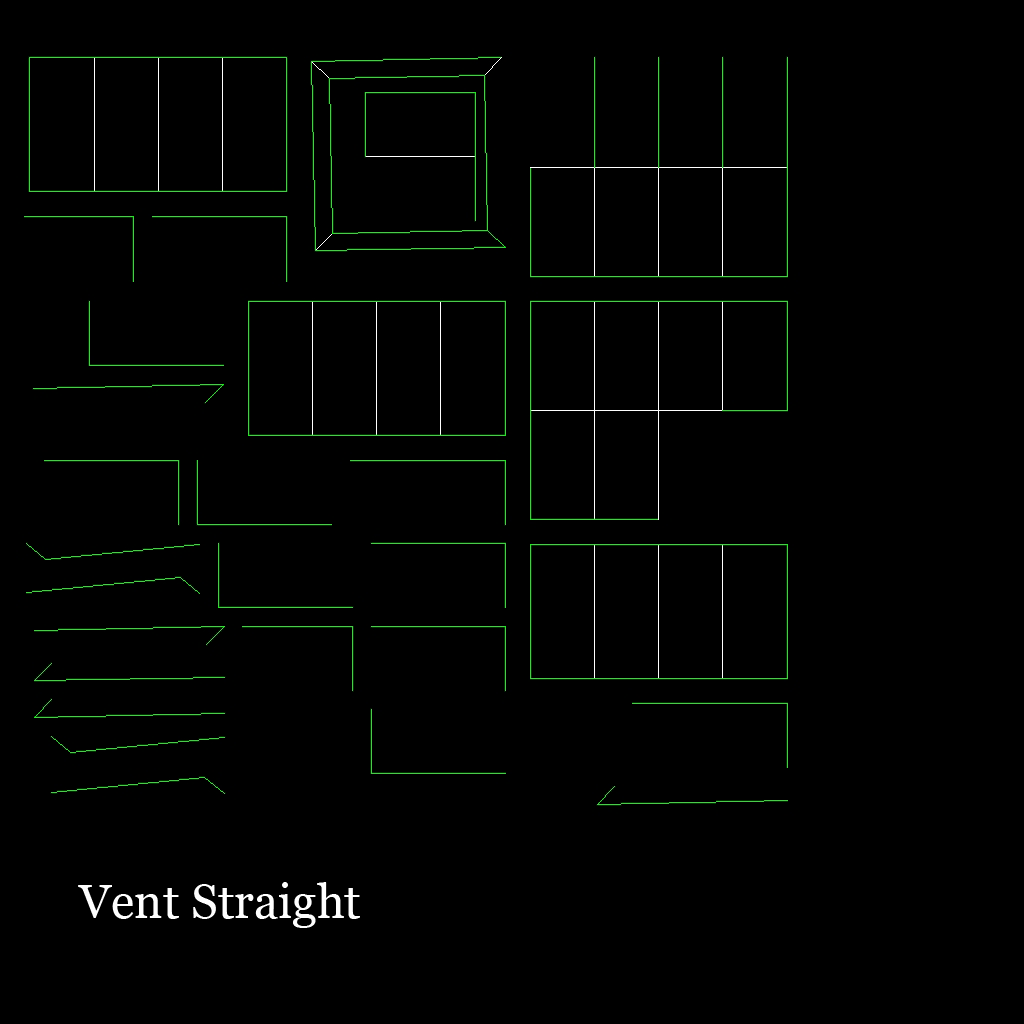
<style>
.page{position:relative;width:1024px;height:1024px;background:#000000}
.page>*{position:absolute;margin:0}
.t1{font:48px "Georgia";color:#ffffff}
</style>
<div class="page">
<p class="t1" style="left:78px;top:882px;width:282px;height:46px">Vent Straight</p>
</div>
